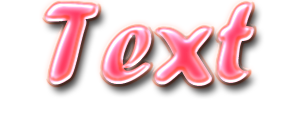
<style>
.page{position:relative;width:300px;height:128px;background:#ffffff}
.page>*{position:absolute;margin:0}
.t1{font:122.7px "ForteMT"}
</style>
<div class="page">
<p class="t1" style="left:45px;top:2px;width:209px;height:84px">Text</p>
</div>
